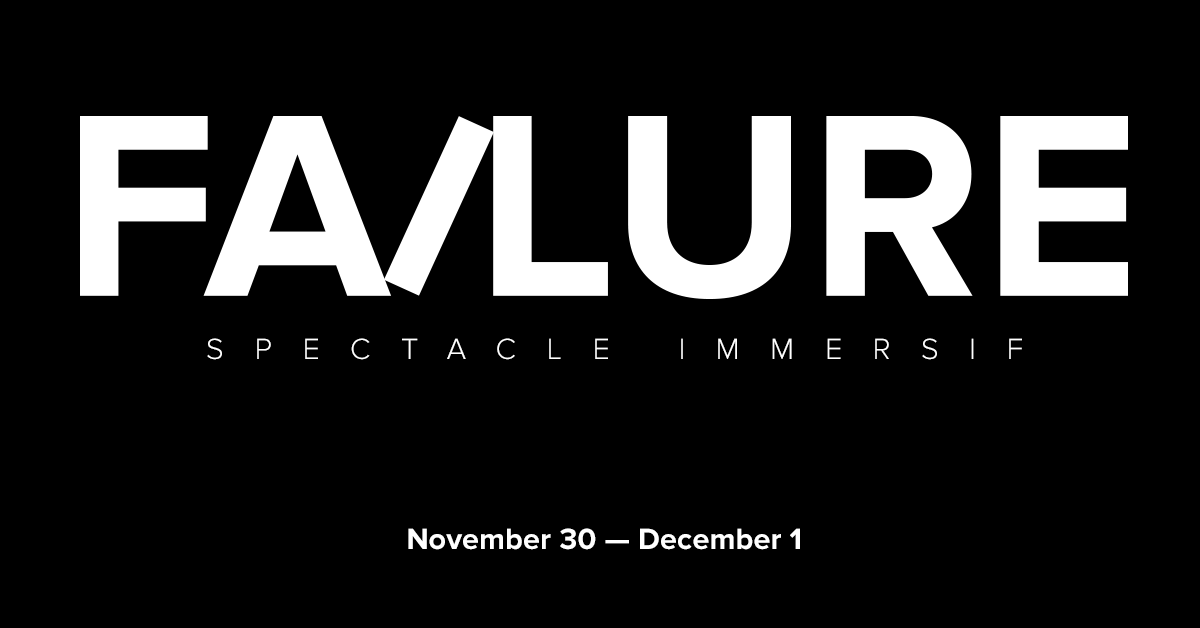
<style>
.page{position:relative;width:1200px;height:628px;background:#000000}
.page>*{position:absolute;margin:0}
.t1{font:30.5px "ProximaNova-Light";letter-spacing:1em;color:#ffffff;text-transform:uppercase}
.t2{font:30.5px "ProximaNova-Bold";letter-spacing:0.005em;color:#ffffff}
</style>
<div class="page">
<p class="t1" style="left:207px;top:338px;width:815px;height:22px">Spectacle immersif</p>
<p class="t2" style="left:408px;top:528px;width:392px;height:22px">November 30 — December 1</p>
</div>
